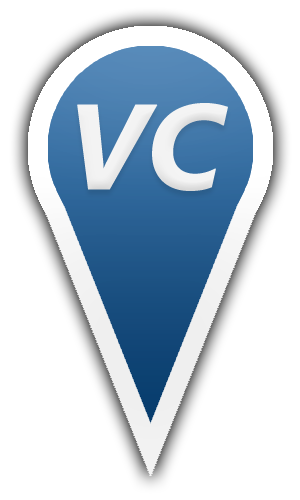
<style>
.page{position:relative;width:300px;height:500px;background:#ffffff}
.page>*{position:absolute;margin:0}
.t1{font:120px "SegoeUI-BoldItalic";color:#f3f3f3;font-weight:bold}
</style>
<div class="page">
<p class="t1" style="left:77px;top:103px;width:151px;height:88px">VC</p>
</div>
